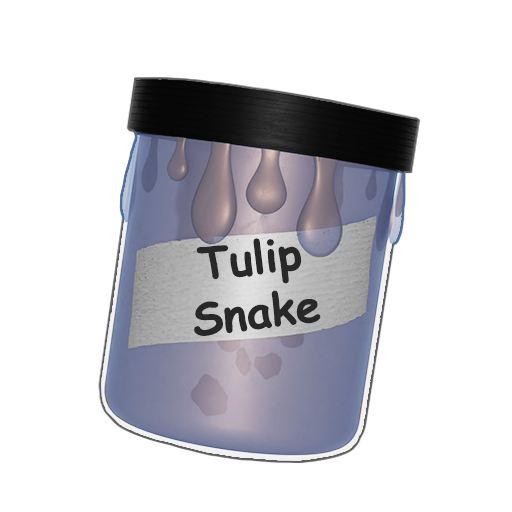
<style>
.page{position:relative;width:512px;height:512px;background:#ffffff}
.page>*{position:absolute;margin:0}
.t1{font:45px "ComicSansMS-Bold";color:#282828}
</style>
<div class="page">
<p class="t1" style="left:194px;top:238px;width:127px;height:98px;text-align:center;rotate:-7deg">Tulip<br>Snake</p>
</div>
